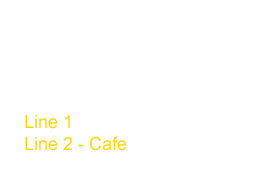
<style>
.page{position:relative;width:256px;height:192px;background:#ffffff}
.page>*{position:absolute;margin:0}
.t1{font:18px "ArialMT";color:#ffd60a}
</style>
<div class="page">
<p class="t1" style="left:25px;top:115px;width:102px;height:36px">Line 1<br>Line 2 - Cafe</p>
</div>
